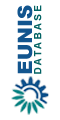
<style>
.page{position:relative;width:60px;height:120px;background:#ffffff}
.page>*{position:absolute;margin:0}
.t1{font:20px "Arial-Black";color:#12558e}
.t2{font:10px "Arial-BoldMT";letter-spacing:0.22em;color:#026263}
</style>
<div class="page">
<p class="t1" style="left:17px;top:5px;width:16px;height:69px;rotate:-90deg">EUNIS</p>
<p class="t2" style="left:34px;top:5px;width:8px;height:69px;rotate:-90deg">DATABASE</p>
</div>
